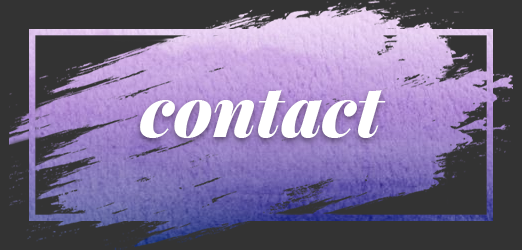
<style>
.page{position:relative;width:522px;height:250px;background:#333333}
.page>*{position:absolute;margin:0}
.t1{font:70px "PlayfairDisplay-BlackItalic";color:#ffffff}
</style>
<div class="page">
<p class="t1" style="left:140px;top:90px;width:246px;height:48px">contact</p>
</div>
